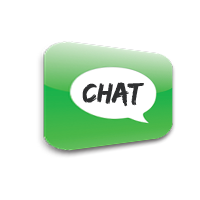
<style>
.page{position:relative;width:200px;height:200px;background:#ffffff}
.page>*{position:absolute;margin:0}
.t1{font:24px "Edo";color:#2f3031}
</style>
<div class="page">
<p class="t1" style="left:82px;top:82px;width:62px;height:25px">CHAT</p>
</div>
